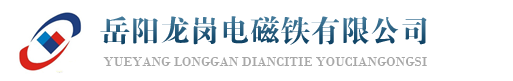
<style>
.page{position:relative;width:513px;height:81px;background:#ffffff}
.page>*{position:absolute;margin:0}
.t1{font:30px "FZDBSJW--GB1-0"}
.t2{font:13px "BodoniMT";color:#a8a8a8}
</style>
<div class="page">
<p class="t1" style="left:100px;top:16px;width:327px;height:29px">岳阳龙岗电磁铁有限公司</p>
<p class="t2" style="left:103px;top:57px;width:324px;height:9px">YUEYANG LONGGAN DIANCITIE YOUCIANGONGSI</p>
</div>
